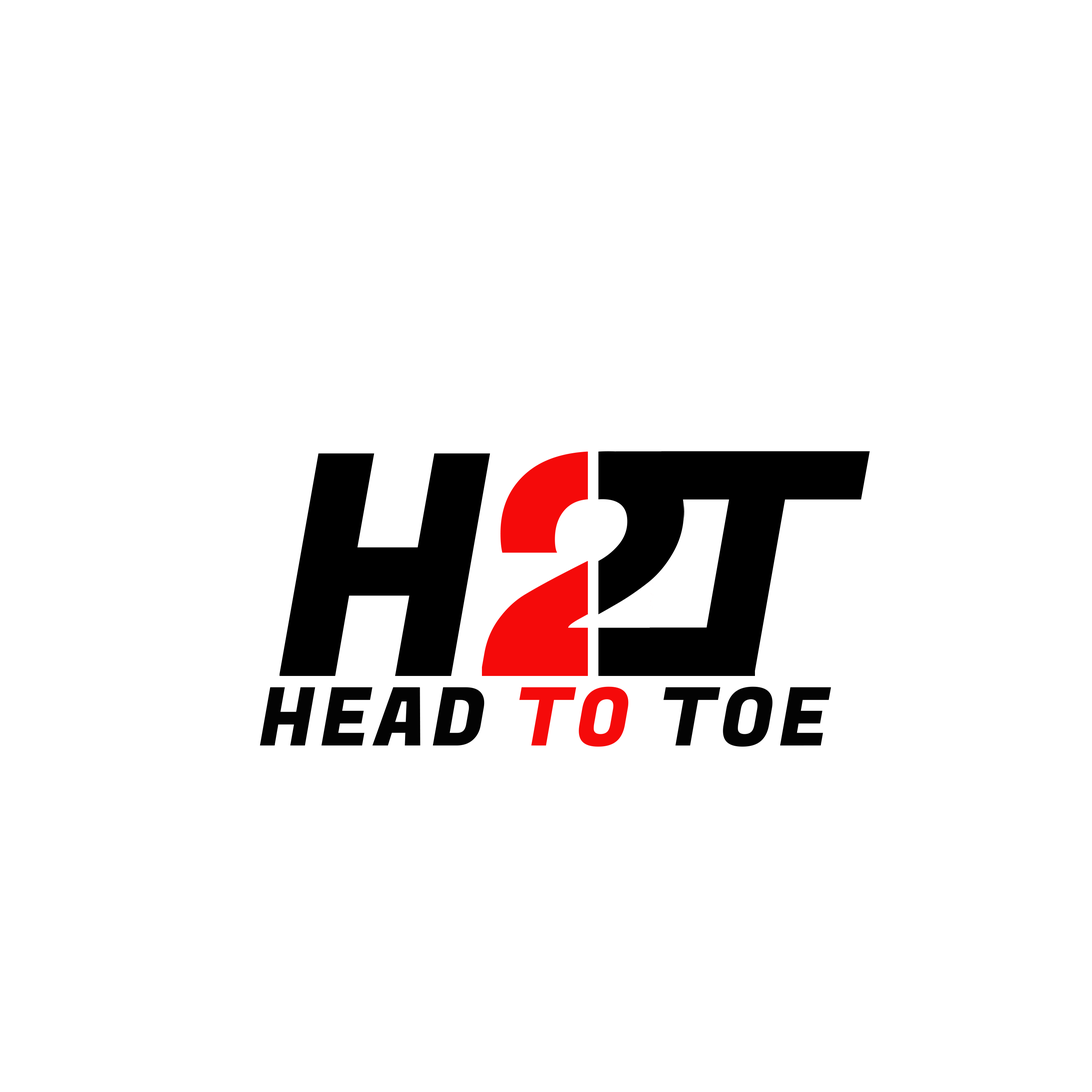
<style>
.page{position:relative;width:1092px;height:1092px;background:#ffffff}
.page>*{position:absolute;margin:0}
.t1{font:81px "FugazOne-Regular";letter-spacing:0.06em;color:#030303}
.t2{font:81px "FugazOne-Regular";letter-spacing:0.06em;color:#f50a0a}
</style>
<div class="page">
<p class="t1" style="left:260px;top:686px;width:571px;height:61px">HEAD <span class="t2">TO </span>TOE</p>
</div>
